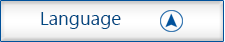
<style>
.page{position:relative;width:225px;height:42px}
.page>*{position:absolute;margin:0}
.t1{font:18.8px "KhmerUI";color:#004882}
</style>
<div class="page">
<p class="t1" style="left:41px;top:12px;width:80px;height:17px">Language</p>
</div>
